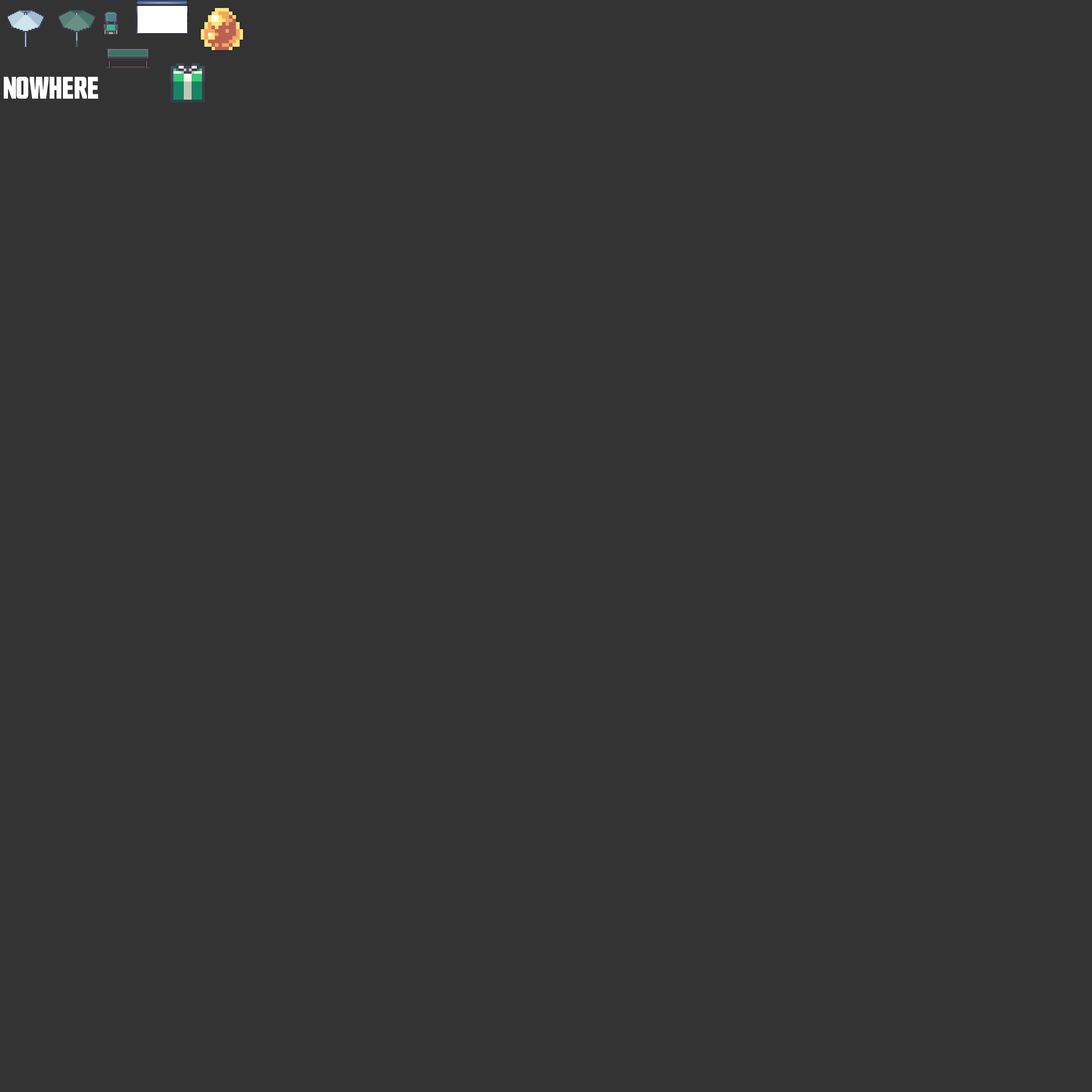
<style>
.page{position:relative;width:1092px;height:1092px;background:#333333}
.page>*{position:absolute;margin:0}
.t1{font:30.2px "Countach-Bold";color:#ffffff}
</style>
<div class="page">
<p class="t1" style="left:4px;top:77px;width:94px;height:22px">NOWHERE</p>
</div>
